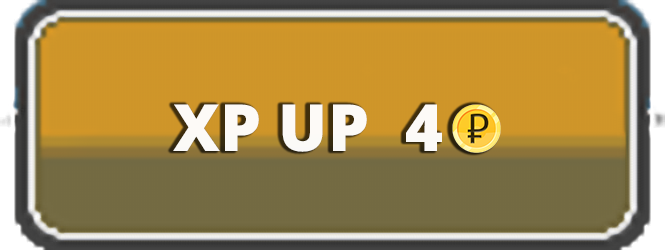
<style>
.page{position:relative;width:665px;height:250px}
.page>*{position:absolute;margin:0}
.t1{font:65px "OpenSans-ExtraBold";color:#ffffff}
</style>
<div class="page">
<p class="t1" style="left:173px;top:104px;width:194px;height:48px;opacity:0.95">XP UP</p>
<p class="t1" style="left:173px;top:104px;width:194px;height:48px;opacity:0.95">XP UP</p>
<p class="t1" style="left:406px;top:104px;width:36px;height:47px;opacity:0.95">4</p>
<p class="t1" style="left:406px;top:104px;width:36px;height:47px;opacity:0.95">4</p>
</div>
